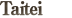
<style>
.page{position:relative;width:72px;height:18px;background:#ffffff}
.page>*{position:absolute;margin:0}
.t1{font:18px "RyuminPro-ExBold";letter-spacing:-0.06em;color:#4a3f32;font-weight:bold;scale:0.9 1}
</style>
<div class="page">
<p class="t1" style="left:0px;top:1px;width:43px;height:15px">Taitei</p>
</div>
